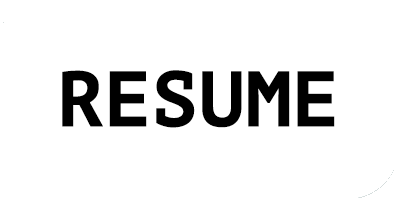
<style>
.page{position:relative;width:394px;height:198px;background:#ffffff}
.page>*{position:absolute;margin:0}
.t1{font:78.2px "PTMono-Bold";color:#000000}
</style>
<div class="page">
<p class="t1" style="left:62px;top:70px;width:273px;height:58px">RESUME</p>
</div>
